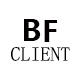
<style>
.page{position:relative;width:80px;height:80px;background:#ffffff}
.page>*{position:absolute;margin:0}
.t1{font:28.8px "MicrosoftYaHeiUI-Bold";color:#040000}
.t2{font:20px "SimSun-ExtB";color:#040000}
</style>
<div class="page">
<p class="t1" style="left:24px;top:19px;width:17px;height:22px">B</p>
<p class="t1" style="left:44px;top:20px;width:13px;height:22px">F</p>
<p class="t2" style="left:11px;top:47px;width:59px;height:14px">CLIENT</p>
</div>
